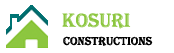
<style>
.page{position:relative;width:174px;height:53px;background:#ffffff}
.page>*{position:absolute;margin:0}
.t1{font:20px "Algerian";color:#8cc63f}
.t2{font:12px "Algerian";color:#000000}
</style>
<div class="page">
<p class="t1" style="left:62px;top:13px;width:69px;height:16px">KOSURI</p>
<p class="t2" style="left:63px;top:36px;width:90px;height:10px">constructions</p>
</div>
